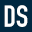
<style>
.page{position:relative;width:32px;height:32px;background:#002740}
.page>*{position:absolute;margin:0}
.t1{font:30px "DINCondensed-Bold";color:#ffffff}
</style>
<div class="page">
<p class="t1" style="left:4px;top:5px;width:24px;height:22px">DS</p>
</div>
